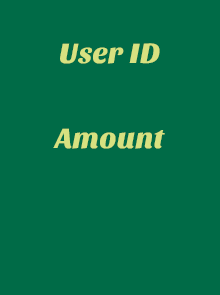
<style>
.page{position:relative;width:220px;height:295px;background:#006b47}
.page>*{position:absolute;margin:0}
.t1{font:29.2px "SansitaOne";color:#d7e180}
</style>
<div class="page">
<p class="t1" style="left:60px;top:43px;width:100px;height:21px">User ID</p>
<p class="t1" style="left:53px;top:128px;width:112px;height:21px">Amount</p>
</div>
